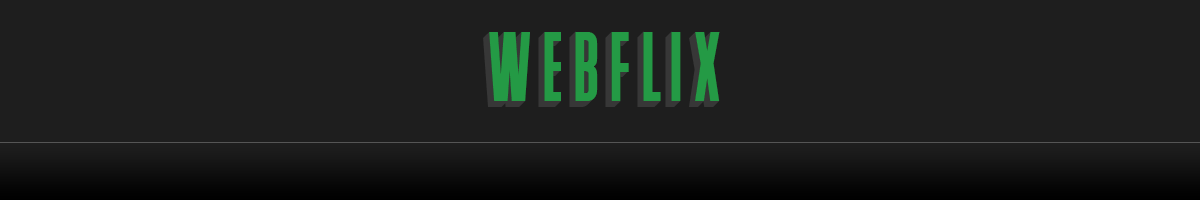
<style>
.page{position:relative;width:1200px;height:200px;background:#1e1e1e}
.page>*{position:absolute;margin:0}
.t1{font:91px "GraphiqueProNext3D";color:#373737}
.t2{font:91px "GraphiqueProNextSo";color:#249a45}
</style>
<div class="page">
<p class="t1" style="left:483px;top:31px;width:236px;height:76px">WEBFLIX</p>
<p class="t2" style="left:489px;top:32px;width:231px;height:69px">WEBFLIX</p>
</div>
